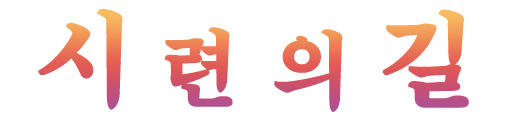
<style>
.page{position:relative;width:512px;height:128px;background:#ffffff}
.page>*{position:absolute;margin:0}
.t1{font:107px "MJemokBatang";letter-spacing:0.12em;font-weight:bold}
.t2{font:88px "MJemokBatang";letter-spacing:0.12em;font-weight:bold}
</style>
<div class="page">
<p class="t1" style="left:38px;top:9px;width:85px;height:101px">시</p>
<p class="t1" style="left:382px;top:9px;width:87px;height:99px">길</p>
<p class="t2" style="left:164px;top:27px;width:69px;height:80px">련</p>
<p class="t2" style="left:274px;top:29px;width:69px;height:84px">의</p>
</div>
